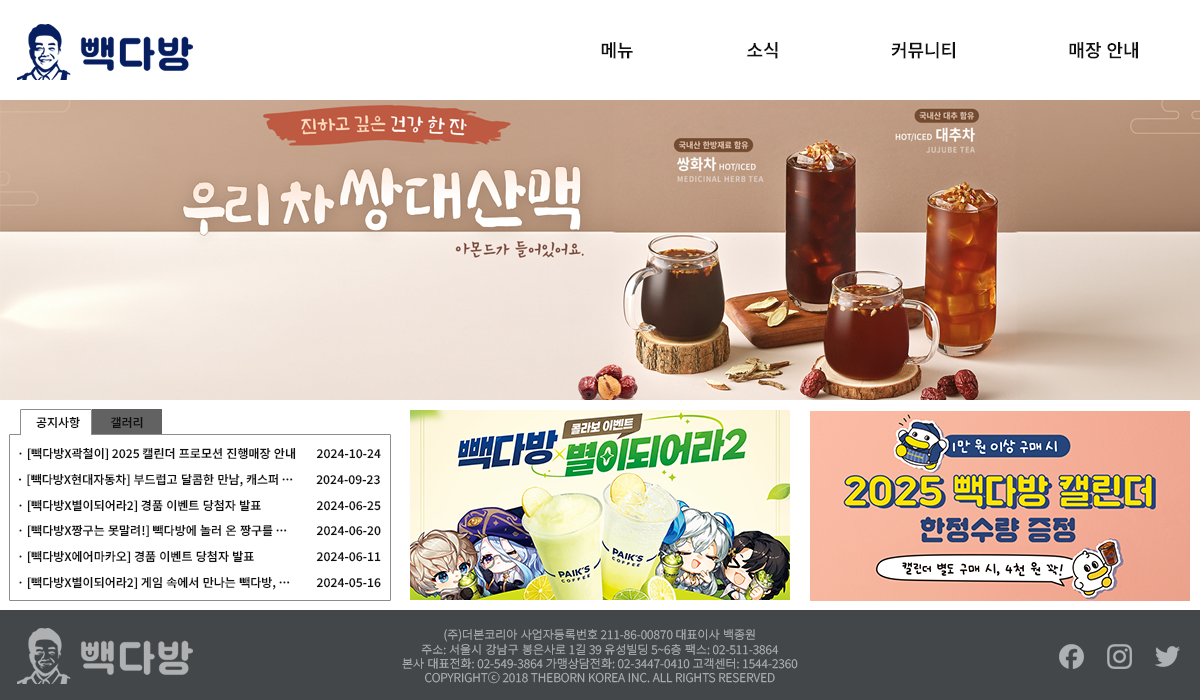
<style>
.page{position:relative;width:1200px;height:700px;background:#ffffff}
.page>*{position:absolute;margin:0}
.t1{font:18px "NotoSansKR-SemiBold";color:#111111}
.t2{font:12px "NotoSansKR-SemiBold";color:#111111}
.t3{font:12px "NotoSansKR-Light";color:#aeb0b2}
</style>
<div class="page">
<p class="t1" style="left:601px;top:42px;width:32px;height:17px">메뉴</p>
<p class="t1" style="left:747px;top:42px;width:31px;height:17px">소식</p>
<p class="t1" style="left:891px;top:42px;width:64px;height:17px">커뮤니티</p>
<p class="t1" style="left:1069px;top:42px;width:69px;height:17px">매장 안내</p>
<p class="t2" style="left:36px;top:416px;width:44px;height:13px">공지사항</p>
<p class="t2" style="left:111px;top:416px;width:32px;height:13px">갤러리</p>
<p class="t2" style="left:19px;top:447px;width:277px;height:14px">· [빽다방X곽철이] 2025 캘린더 프로모션 진행매장 안내</p>
<p class="t2" style="left:316px;top:449px;width:65px;height:10px">2024-10-24</p>
<p class="t2" style="left:18px;top:473px;width:275px;height:14px">· [빽다방X현대자동차] 부드럽고 달콤한 만남, 캐스퍼</p>
<p class="t2" style="left:316px;top:475px;width:64px;height:10px">2024-09-23</p>
<p class="t2" style="left:19px;top:499px;width:242px;height:14px">· [빽다방X별이되어라2] 경품 이벤트 당첨자 발표</p>
<p class="t2" style="left:316px;top:501px;width:65px;height:10px">2024-06-25</p>
<p class="t2" style="left:19px;top:524px;width:268px;height:14px">· [빽다방X짱구는 못말려!] 빽다방에 놀러 온 짱구를</p>
<p class="t2" style="left:316px;top:526px;width:65px;height:10px">2024-06-20</p>
<p class="t2" style="left:19px;top:550px;width:235px;height:14px">· [빽다방X에어마카오] 경품 이벤트 당첨자 발표</p>
<p class="t2" style="left:316px;top:552px;width:65px;height:10px">2024-06-11</p>
<p class="t2" style="left:19px;top:576px;width:271px;height:14px">· [빽다방X별이되어라2] 게임 속에서 만나는 빽다방,</p>
<p class="t2" style="left:316px;top:578px;width:65px;height:10px">2024-05-16</p>
<p class="t3" style="left:402px;top:629px;width:396px;height:55px;text-align:center">(주)더본코리아 사업자등록번호 211-86-00870 대표이사 백종원<br>주소: 서울시 강남구 봉은사로 1길 39 유성빌딩 5~6층 팩스: 02-511-3864<br>본사 대표전화: 02-549-3864 가맹상담전화: 02-3447-0410 고객센터: 1544-2360<br>COPYRIGHTⓒ 2018 THEBORN KOREA INC. ALL RIGHTS RESERVED</p>
</div>
